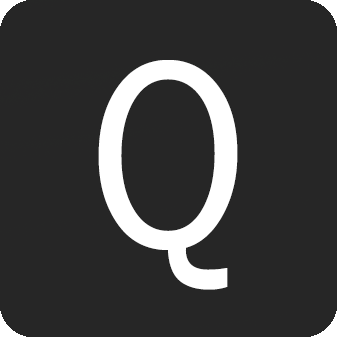
<style>
.page{position:relative;width:337px;height:337px;background:#262626}
.page>*{position:absolute;margin:0}
.t1{font:273.3px "FranklinGothic-Book";letter-spacing:-0.1em;color:#ffffff;font-weight:bold;scale:0.92 1}
</style>
<div class="page">
<p class="t1" style="left:98px;top:60px;width:140px;height:230px">Q</p>
</div>
